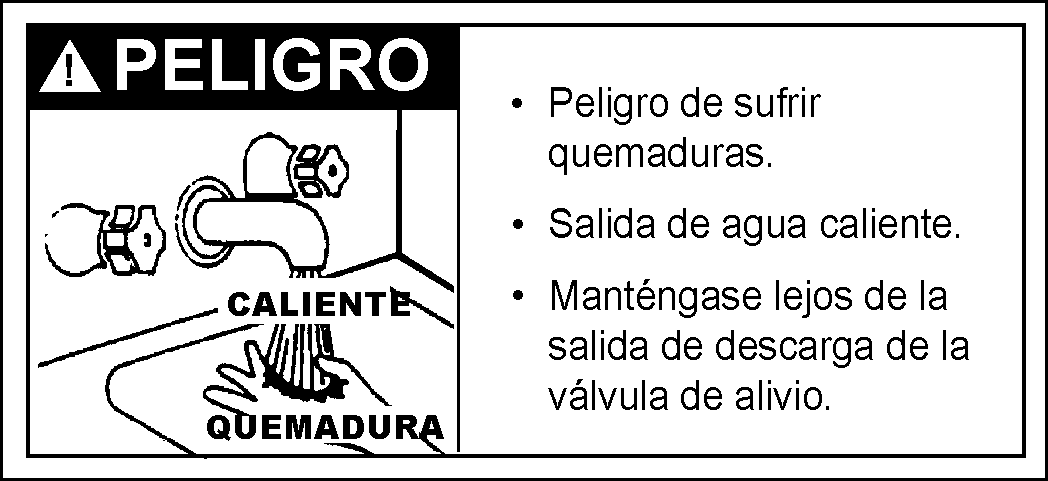
<style>
.page{position:relative;width:1048px;height:481px;background:#ffffff}
.page>*{position:absolute;margin:0}
.t1{font:70.8px "Arial-BoldMT";color:#ffffff}
.t2{font:41.7px "ArialMT";color:#000000;scale:0.93 1}
.t3{font:40.7px "ArialMT";color:#000000}
.t4{font:33.3px "Arial-Black";color:#000000}
</style>
<div class="page">
<p class="t1" style="left:117px;top:38px;width:311px;height:53px">PELIGRO</p>
<p class="t2" style="left:548px;top:87px;width:421px;height:323px">Peligro de sufrir   quemaduras.<br>Salida de agua caliente.<br>Manténgase lejos de la    salida de descarga de la    válvula de alivio.</p>
<p class="t3" style="left:512px;top:98px;width:10px;height:10px">•</p>
<p class="t3" style="left:513px;top:219px;width:10px;height:10px">•</p>
<p class="t4" style="left:228px;top:292px;width:182px;height:24px">CALIENTE</p>
<p class="t3" style="left:513px;top:290px;width:10px;height:10px">•</p>
<p class="t4" style="left:207px;top:415px;width:237px;height:26px">QUEMADURA</p>
</div>
